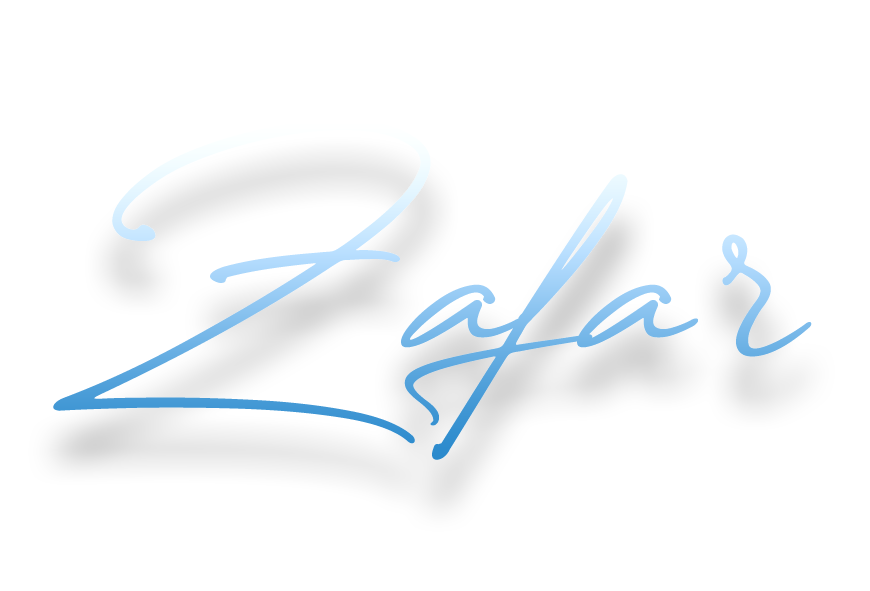
<style>
.page{position:relative;width:870px;height:591px;background:#ffffff}
.page>*{position:absolute;margin:0}
.t1{font:406.9px "CreattionDemo"}
</style>
<div class="page">
<p class="t1" style="left:53px;top:119px;width:759px;height:341px">Zafar</p>
</div>
